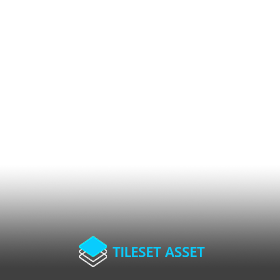
<style>
.page{position:relative;width:280px;height:280px;background:#ffffff}
.page>*{position:absolute;margin:0}
.t1{font:14px "SegoeUI-Semibold";color:#09ccfd}
</style>
<div class="page">
<p class="t1" style="left:112px;top:247px;width:93px;height:10px">TILESET ASSET</p>
</div>
